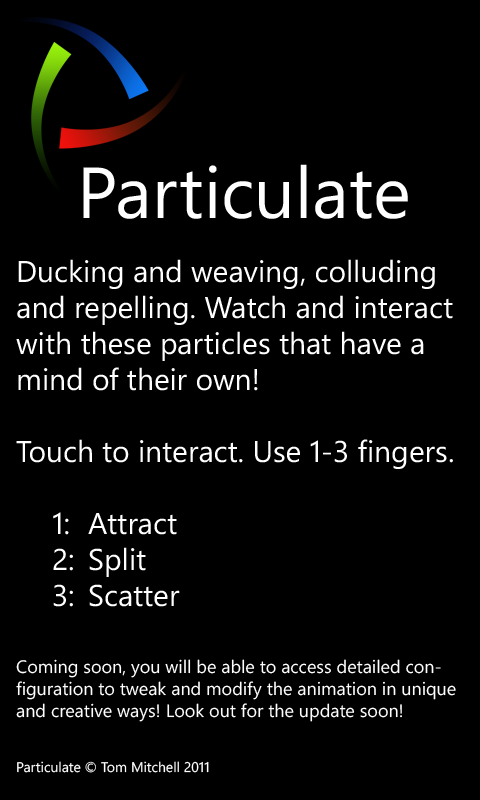
<style>
.page{position:relative;width:480px;height:800px;background:#000000}
.page>*{position:absolute;margin:0}
.t1{font:72px "SegoeWP";color:#ffffff}
.t2{font:30px "SegoeWP";color:#ffffff}
.t3{font:18px "SegoeWP";color:#ffffff}
.t4{font:14px "SegoeWP";color:#ffffff}
</style>
<div class="page">
<p class="t1" style="left:83px;top:164px;width:325px;height:55px">Particulate</p>
<p class="t2" style="left:16px;top:259px;width:440px;height:514px">Ducking and weaving, colluding and repelling. Watch and interact with these particles that have a mind of their own!<br><br>Touch to interact. Use 1-3 fingers.<br><br> 1: Attract<br> 2: Split<br> 3: Scatter<br><br><br><span class="t3">Coming soon, you will be able to access detailed configuration to tweak and modify the animation in unique and creative ways! Look out for the update soon!<br><br></span><span class="t4"><br>Particulate © Tom Mitchell 2011</span></p>
</div>
